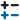
<style>
.page{position:relative;width:20px;height:20px;background:#ffffff}
.page>*{position:absolute;margin:0}
.t1{font:24px "Miso-Bold";letter-spacing:-0.025em;color:#222222}
.t2{font:24px "Miso-Bold";letter-spacing:-0.025em;color:#006699}
</style>
<div class="page">
<p class="t1" style="left:0px;top:1px;width:9px;height:9px">+</p>
<p class="t1" style="left:10px;top:4px;width:9px;height:3px">-</p>
<p class="t2" style="left:0px;top:11px;width:9px;height:9px">+</p>
<p class="t2" style="left:10px;top:14px;width:9px;height:3px">-</p>
</div>
